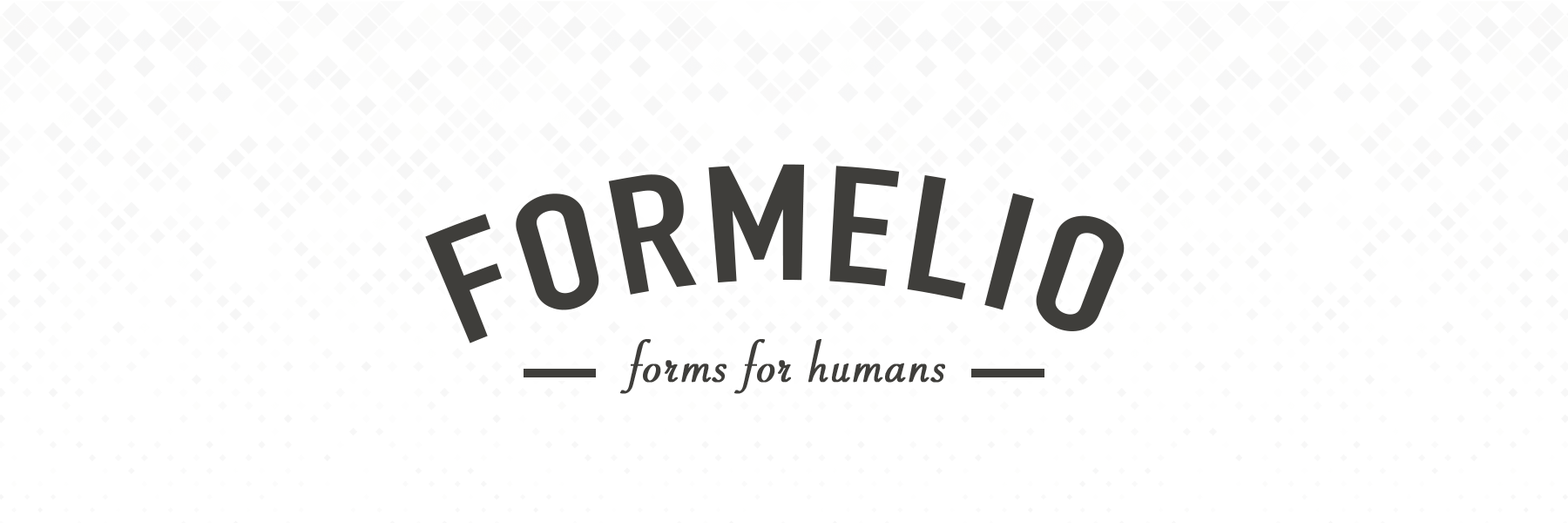
<style>
.page{position:relative;width:1568px;height:523px;background:#ffffff}
.page>*{position:absolute;margin:0}
.t1{font:161.6px "DINCondensed-Bold";letter-spacing:0.06em;color:#3f3e3b;scale:1.03 1}
.t2{font:60.8px "SavoyeLetPlain";letter-spacing:0.02em;color:#3f3e3b;font-weight:bold;scale:1.03 1}
</style>
<div class="page">
<p class="t1" style="left:425px;top:164px;width:700px;height:179px">FORMELIO</p>
<p class="t2" style="left:620px;top:339px;width:325px;height:55px">forms for humans</p>
</div>
